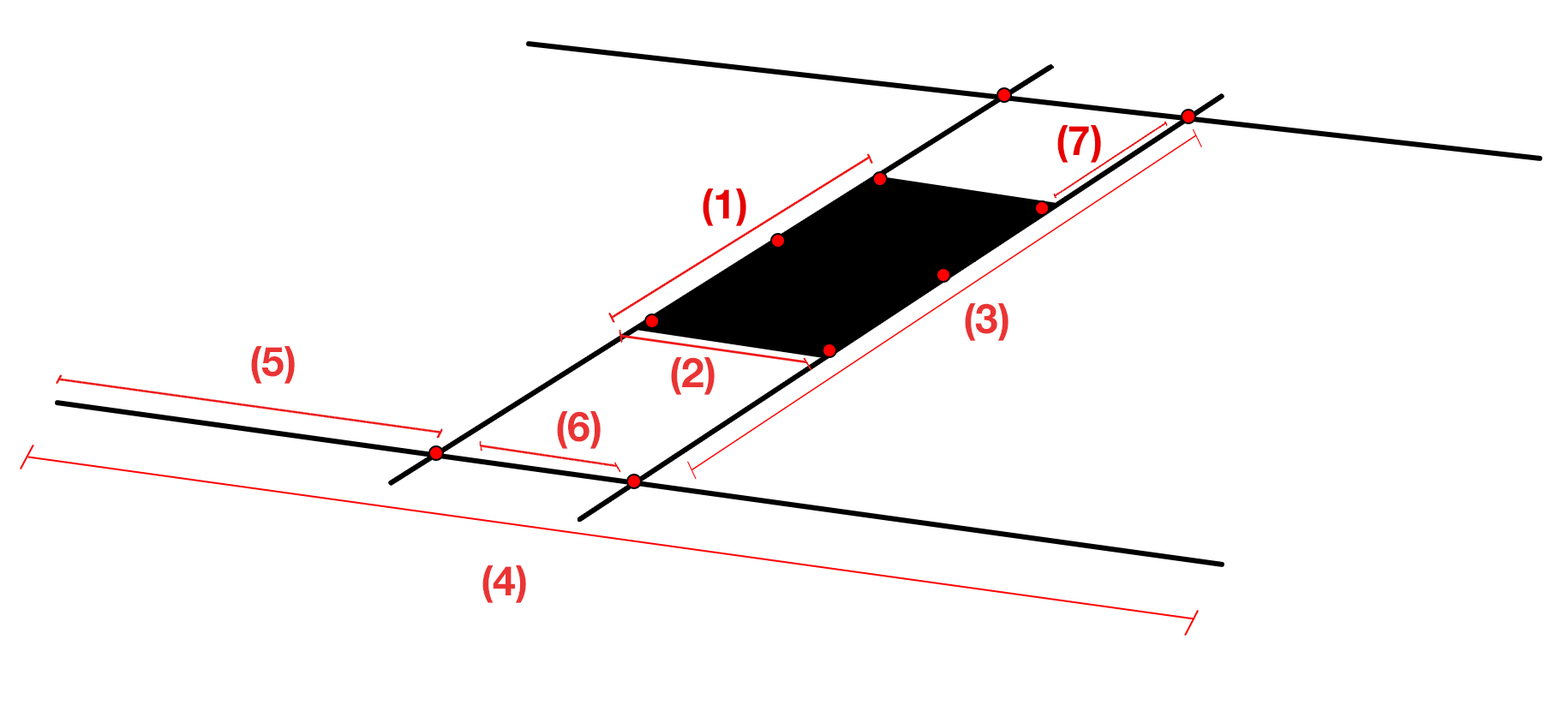
<style>
.page{position:relative;width:1568px;height:705px;background:#ffffff}
.page>*{position:absolute;margin:0}
.t1{font:41.1px "HelveticaNeue-Bold";color:#e80000}
.t2{font:41.1px "HelveticaNeue-Bold";color:#ea3434}
</style>
<div class="page">
<p class="t1" style="left:1057px;top:125px;width:44px;height:38px">(7)</p>
<p class="t1" style="left:703px;top:189px;width:43px;height:37px">(1)</p>
<p class="t2" style="left:965px;top:303px;width:43px;height:38px">(3)</p>
<p class="t2" style="left:251px;top:346px;width:44px;height:38px">(5)</p>
<p class="t2" style="left:671px;top:357px;width:44px;height:38px">(2)</p>
<p class="t2" style="left:557px;top:411px;width:44px;height:38px">(6)</p>
<p class="t2" style="left:482px;top:566px;width:44px;height:37px">(4)</p>
</div>
